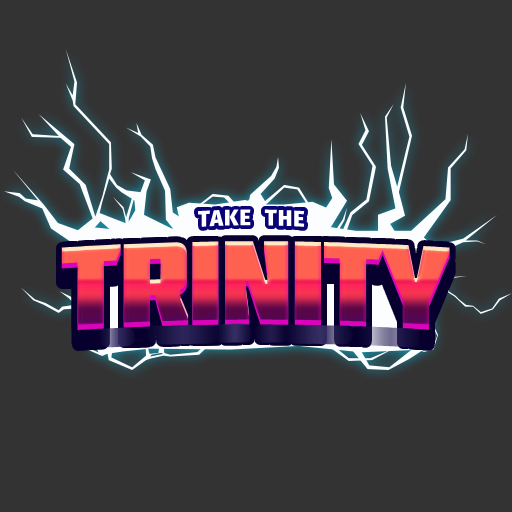
<style>
.page{position:relative;width:512px;height:512px;background:#333333}
.page>*{position:absolute;margin:0}
.t1{font:22.7px "FiraSans-Heavy";letter-spacing:0.05em;color:#ffffff;scale:0.96 1}
.t2{font:119px "Molot";letter-spacing:-0.025em}
</style>
<div class="page">
<p class="t1" style="left:198px;top:209px;width:107px;height:18px">TAKE  THE</p>
<p class="t2" style="left:61px;top:241px;width:389px;height:89px">TRINITY</p>
</div>
